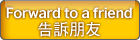
<style>
.page{position:relative;width:140px;height:40px}
.page>*{position:absolute;margin:0}
.t1{font:14px/17px "BritishCouncilSans-Bold";letter-spacing:-0.025em;color:#ffffff}
.t2{font:16px/17px "DFHeiStd-W7";color:#ffffff}
</style>
<div class="page">
<p class="t1" style="left:6px;top:7px;width:126px;height:30px;text-align:center">Forward to a friend<br><span class="t2">告訴朋友</span></p>
</div>
